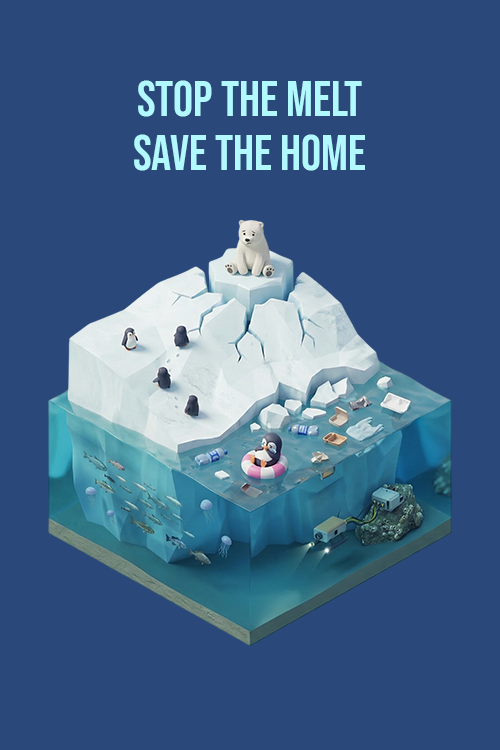
<style>
.page{position:relative;width:500px;height:750px;background:#2a487a}
.page>*{position:absolute;margin:0}
.t1{font:50px "BebasNeue-Regular";color:#b2f8ff}
</style>
<div class="page">
<p class="t1" style="left:138px;top:80px;width:224px;height:37px">STOP THE MELT</p>
<p class="t1" style="left:134px;top:134px;width:231px;height:37px">SAVE THE HOME</p>
</div>
